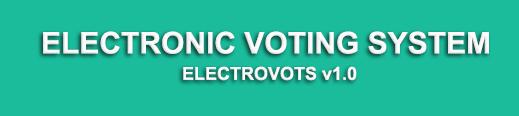
<style>
.page{position:relative;width:519px;height:116px;background:#1abc9c}
.page>*{position:absolute;margin:0}
.t1{font:30px "Arial-BoldMT";color:#fcfcfc}
.t2{font:18px "Arial-BoldMT";color:#fcfcfc}
</style>
<div class="page">
<p class="t1" style="left:43px;top:31px;width:446px;height:23px">ELECTRONIC VOTING SYSTEM</p>
<p class="t2" style="left:183px;top:66px;width:174px;height:15px">ELECTROVOTS v1.0</p>
</div>
